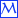
<style>
.page{position:relative;width:18px;height:18px;background:#ffffff}
.page>*{position:absolute;margin:0}
.t1{font:14px "Calligraphic421BT-RomanB";color:#1439f2}
</style>
<div class="page">
<p class="t1" style="left:1px;top:2px;width:16px;height:13px">M</p>
</div>
